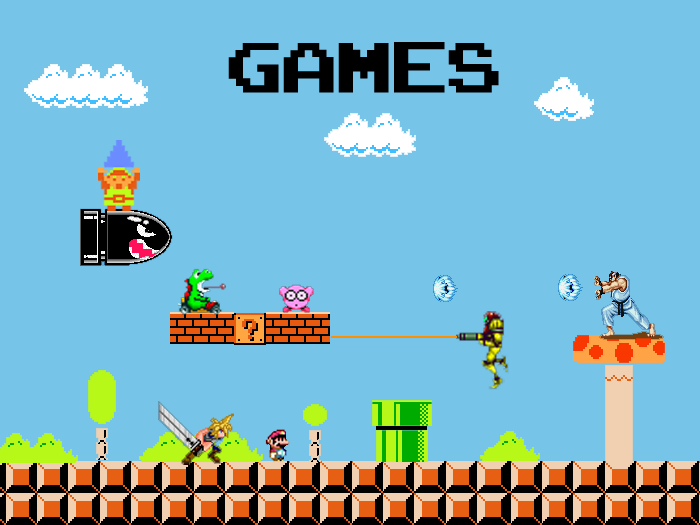
<style>
.page{position:relative;width:700px;height:525px;background:#76c4e8}
.page>*{position:absolute;margin:0}
.t1{font:100px "ArcadeClassic";color:#000000}
</style>
<div class="page">
<p class="t1" style="left:228px;top:42px;width:271px;height:51px">GAMES</p>
</div>
